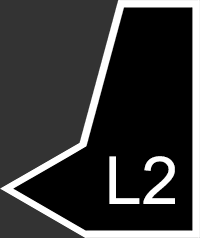
<style>
.page{position:relative;width:200px;height:238px;background:#000000}
.page>*{position:absolute;margin:0}
.t1{font:66.1px "ArialMT";color:#ffffff}
</style>
<div class="page">
<p class="t1" style="left:109px;top:156px;width:66px;height:48px">L2</p>
</div>
